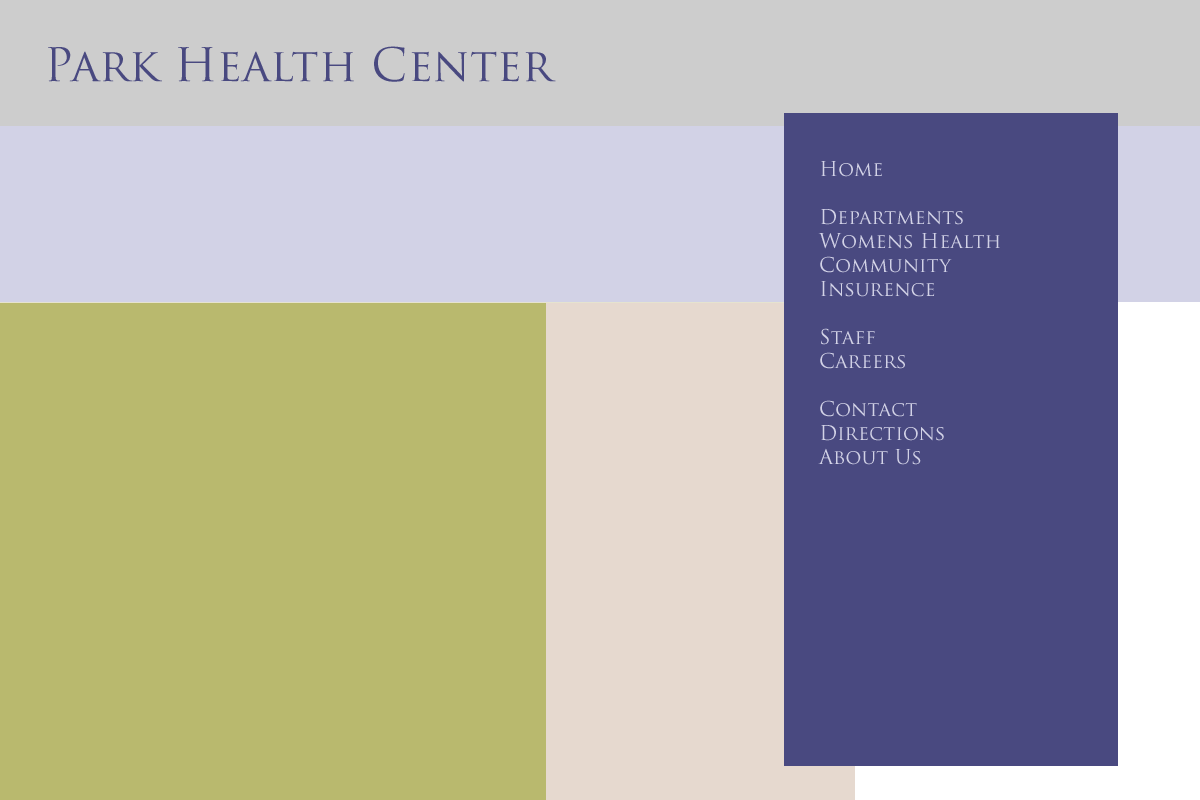
<style>
.page{position:relative;width:1200px;height:800px;background:#b9b96e}
.page>*{position:absolute;margin:0}
.t1{font:45px "TrajanPro-Regular";color:#494980}
.t2{font:20px "TrajanPro-Regular";color:#d2d2e6}
</style>
<div class="page">
<p class="t1" style="left:48px;top:46px;width:508px;height:36px">Park Health Center</p>
<p class="t2" style="left:818px;top:161px;width:182px;height:304px">Home<br><br>Departments<br>Womens Health<br>Community<br>Insurence<br><br>Staff<br>Careers<br><br>Contact<br>Directions<br>About Us</p>
</div>
